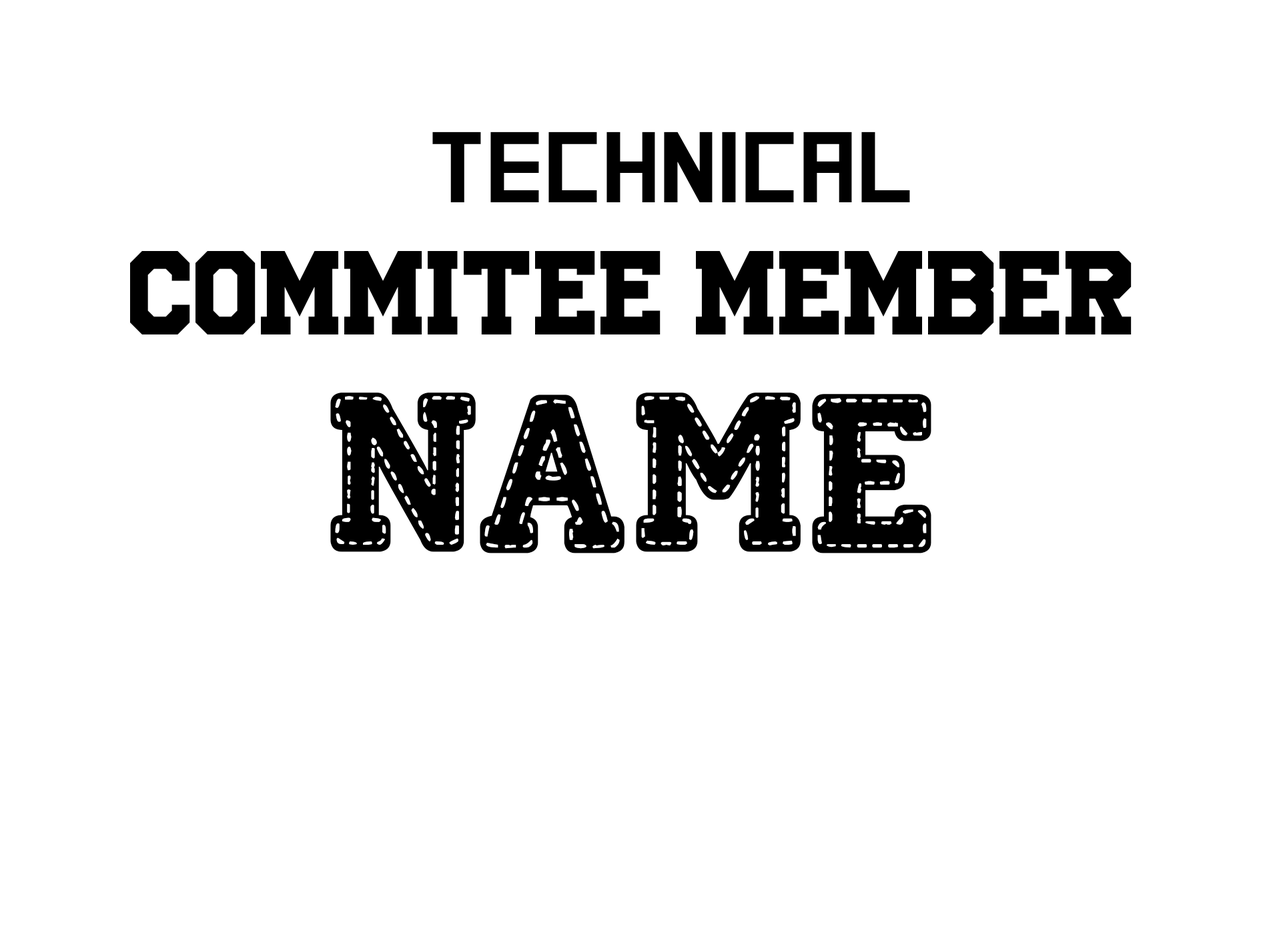
<style>
.page{position:relative;width:1261px;height:946px;background:#ffffff}
.page>*{position:absolute;margin:0}
.t1{font:100.1px "SquareFont";color:#000000}
.t2{font:83.4px "UniversityRegular";color:#000000}
.t3{font:166.8px "Stitch'nSchool";color:#000000}
</style>
<div class="page">
<p class="t1" style="left:432px;top:131px;width:478px;height:71px">TECHNICAL</p>
<p class="t2" style="left:130px;top:251px;width:1002px;height:83px">COMMITEE MEMBER</p>
<p class="t3" style="left:330px;top:392px;width:602px;height:161px">NAME</p>
</div>
